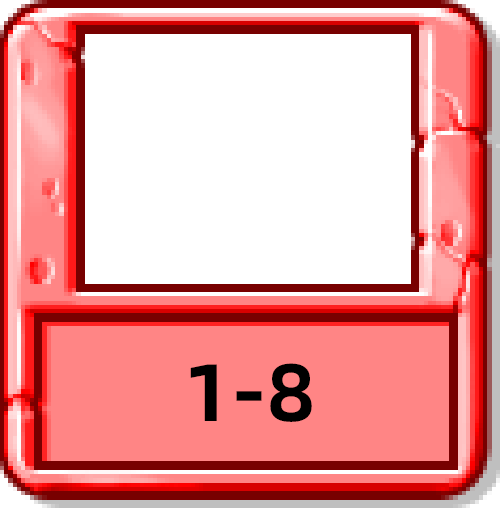
<style>
.page{position:relative;width:500px;height:508px;background:#ffffff}
.page>*{position:absolute;margin:0}
.t1{font:81.4px "AlibabaPuHuiTiB";color:#000000}
</style>
<div class="page">
<p class="t1" style="left:190px;top:363px;width:122px;height:59px">1-8</p>
</div>
